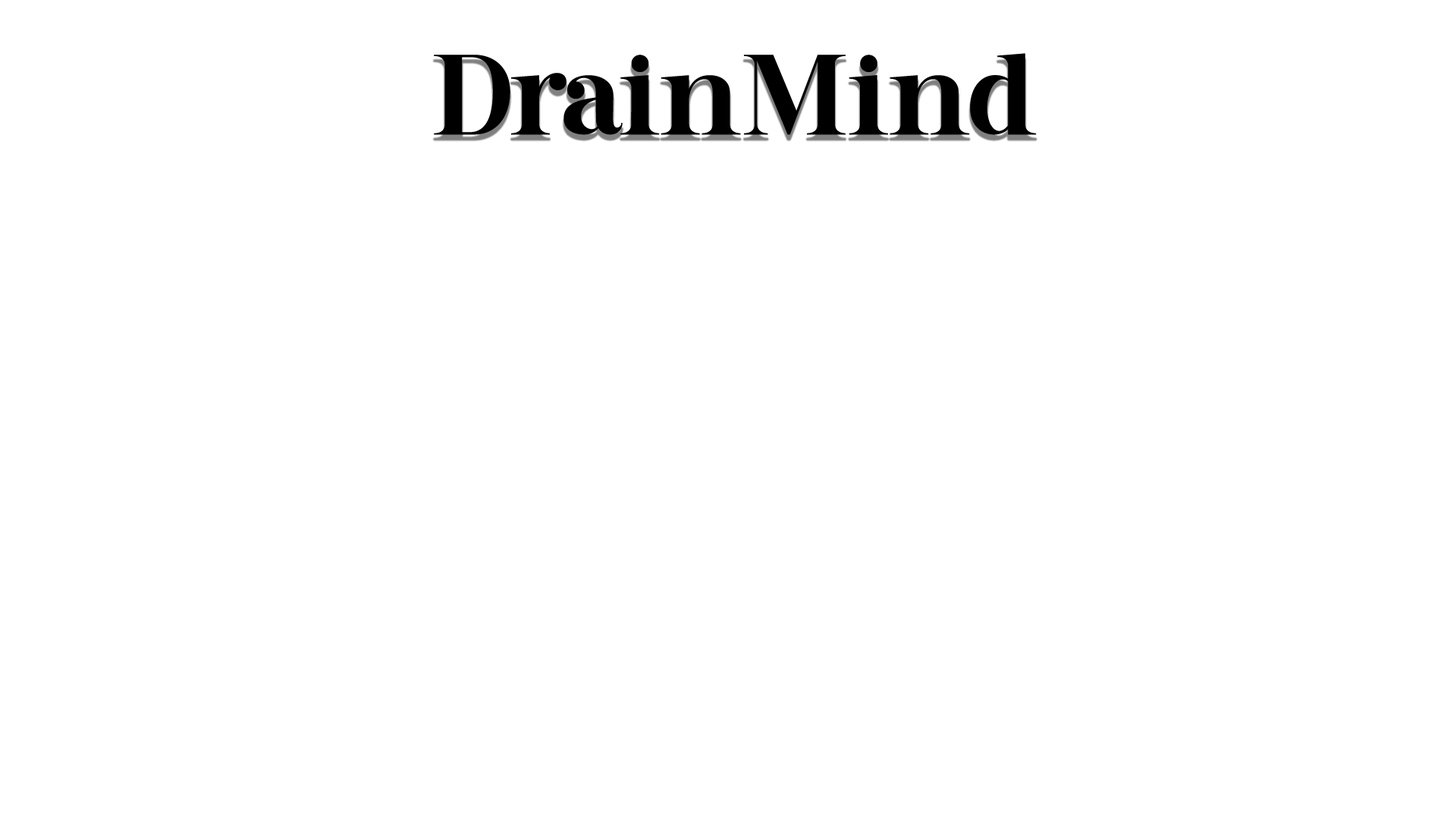
<style>
.page{position:relative;width:1456px;height:819px;background:#ffffff}
.page>*{position:absolute;margin:0}
.t1{font:113.7px "ButtershineSerif";color:#000000}
</style>
<div class="page">
<p class="t1" style="left:434px;top:53px;width:603px;height:82px">DrainMind</p>
</div>
